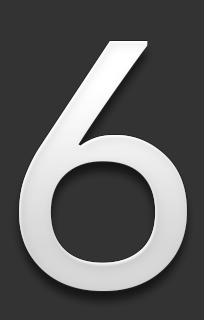
<style>
.page{position:relative;width:204px;height:320px;background:#333333}
.page>*{position:absolute;margin:0}
.t1{font:344.1px "Prelude-Medium";color:#e5e5e5}
</style>
<div class="page">
<p class="t1" style="left:19px;top:41px;width:168px;height:250px">6</p>
<p class="t1" style="left:19px;top:41px;width:168px;height:250px">6</p>
</div>
